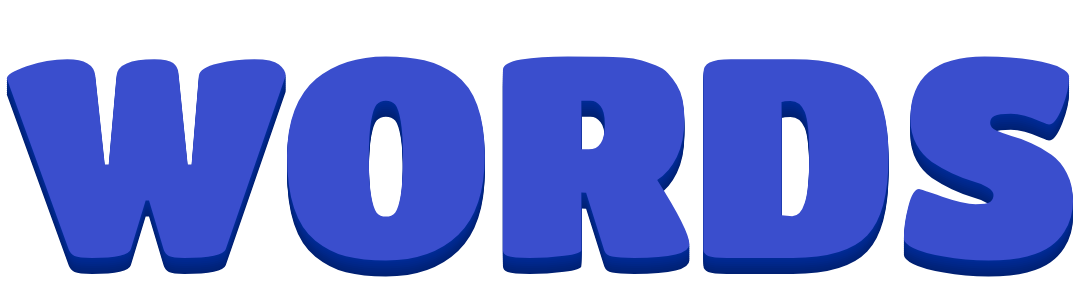
<style>
.page{position:relative;width:1080px;height:300px;background:#3a4ecd}
.page>*{position:absolute;margin:0}
.t1{font:280px "TitanOne";color:#3a4ecd}
</style>
<div class="page">
<p class="t1" style="left:6px;top:56px;width:1068px;height:205px">WORDS</p>
</div>
